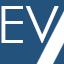
<style>
.page{position:relative;width:64px;height:64px;background:#23527c}
.page>*{position:absolute;margin:0}
.t1{font:52px "CenturyGothic";color:#ffffff}
</style>
<div class="page">
<p class="t1" style="left:1px;top:6px;width:58px;height:37px">EV</p>
</div>
